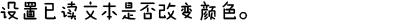
<style>
.page{position:relative;width:415px;height:21px;background:#ffffff}
.page>*{position:absolute;margin:0}
.t1{font:22px "¢è?";color:#000000}
</style>
<div class="page">
<p class="t1" style="left:0px;top:1px;width:248px;height:20px">设置已读文本是否改变颜色。</p>
</div>
